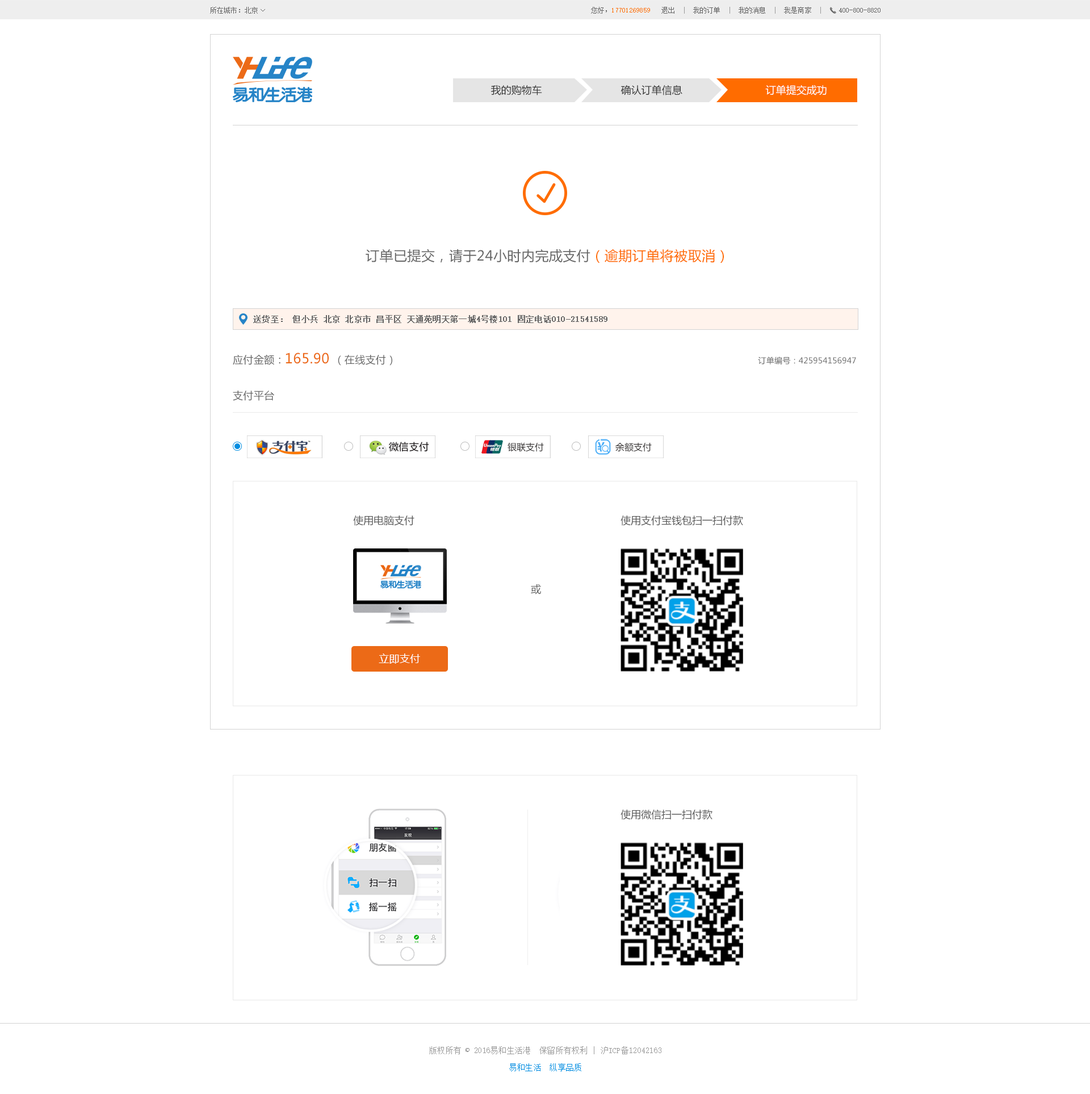
<style>
.page{position:relative;width:1090px;height:1094px;background:#ffffff}
.page>*{position:absolute;margin:0}
.t1{font:6.8px "SimSun";letter-spacing:0.02em;color:#666666}
.t2{font:6.8px "SimSun";letter-spacing:0.02em;color:#ff6c00}
.t3{font:6.8px "SimSun";letter-spacing:0.02em;color:#999999}
.t4{font:10.2px "MicrosoftYaHei";color:#333333}
.t5{font:10.2px "MicrosoftYaHei";color:#ffffff}
.t6{font:13.6px "MicrosoftYaHei";letter-spacing:0.02em;color:#666666}
.t7{font:13.6px "MicrosoftYaHei";letter-spacing:0.02em;color:#ff6c00}
.t8{font:7.9px "SimSun";letter-spacing:0.02em;color:#666666;font-weight:bold}
.t9{font:7.9px "MicrosoftYaHei";letter-spacing:0.02em;color:#666666}
.t10{font:10.2px "MicrosoftYaHei";letter-spacing:0.02em;color:#666666}
.t11{font:13.6px "MicrosoftYaHei";letter-spacing:0.02em;color:#ec6a17}
.t12{font:9.1px "MicrosoftYaHei";color:#2d2a2a}
.t13{font:10.2px "MicrosoftYaHei";color:#595959}
.t14{font:10.2px "MicrosoftYaHei";letter-spacing:0.02em;color:#ffffff}
.t15{font:7.9px/17px "SimSun";letter-spacing:0.02em;color:#999999}
.t16{font:7.9px/17px "SimSun";letter-spacing:0.02em;color:#008de1}
</style>
<div class="page">
<p class="t1" style="left:210px;top:7px;width:48px;height:7px">所在城市：北京</p>
<p class="t1" style="left:261px;top:9px;width:4px;height:2px">&gt;</p>
<p class="t2" style="left:591px;top:7px;width:230px;height:7px"><span class="t1">您好，</span>17701269859<span class="t1">   退出</span><span class="t3">  |  </span><span class="t1">我的订单</span><span class="t3">  |  </span><span class="t1">我的消息</span><span class="t3">  |  </span><span class="t1">我是商家</span><span class="t3">  |</span></p>
<p class="t1" style="left:839px;top:8px;width:42px;height:4px">400-800-8820</p>
<p class="t4" style="left:491px;top:85px;width:51px;height:10px">我的购物车</p>
<p class="t4" style="left:621px;top:85px;width:61px;height:10px">确认订单信息</p>
<p class="t5" style="left:765px;top:85px;width:62px;height:10px">订单提交成功</p>
<p class="t6" style="left:366px;top:249px;width:358px;height:14px">订单已提交，请于24小时内完成支付<span class="t7">（逾期订单将被取消）</span></p>
<p class="t8" style="left:253px;top:315px;width:354px;height:8px">送货至： 但小兵 北京 北京市 昌平区 天通苑明天第一城4号楼101 固定电话010-21541589</p>
<p class="t9" style="left:233px;top:353px;width:623px;height:13px"><span class="t10">应付金额：</span><span class="t11">165.90 </span><span class="t10">（在线支付）                                                                                                                </span>订单编号：425954156947</p>
<p class="t10" style="left:233px;top:391px;width:41px;height:10px">支付平台</p>
<p class="t12" style="left:508px;top:442px;width:36px;height:10px">银联支付</p>
<p class="t12" style="left:615px;top:442px;width:37px;height:10px">余额支付</p>
<p class="t13" style="left:353px;top:515px;width:61px;height:11px">使用电脑支付</p>
<p class="t13" style="left:621px;top:515px;width:122px;height:11px">使用支付宝钱包扫一扫付款</p>
<p class="t13" style="left:531px;top:584px;width:10px;height:10px">或</p>
<p class="t14" style="left:379px;top:653px;width:41px;height:11px">立即支付</p>
<p class="t13" style="left:621px;top:810px;width:91px;height:10px">使用微信扫一扫付款</p>
<p class="t15" style="left:429px;top:1046px;width:232px;height:25px;text-align:center">版权所有 © 2016易和生活港  保留所有权利 | 沪ICP备12042163<br><span class="t16">易和生活  纵享品质</span></p>
</div>
